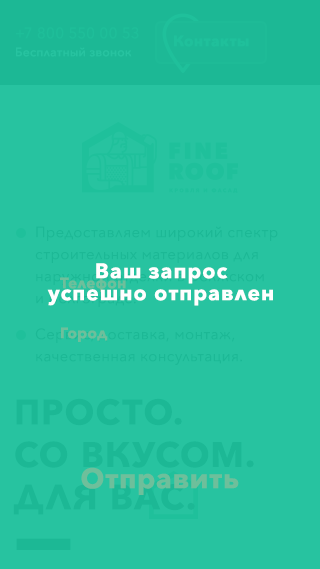
<style>
.page{position:relative;width:320px;height:569px;background:#27c3a0}
.page>*{position:absolute;margin:0}
.t1{font:15px "AvenirNext-Regular";letter-spacing:0.025em;color:#1ebe99}
.t2{font:15px "AvenirNext-Bold";letter-spacing:0.025em;color:#1fc09b}
.t3{font:12px "AvenirNext-Medium";letter-spacing:0.025em;color:#27c3a0}
.t4{font:21px/22px "AvenirNext-Bold";letter-spacing:0.05em;color:#ffffff}
.t5{font:15px/22px "AvenirNext-Regular";letter-spacing:0.025em;color:#1cb895}
.t6{font:15px "AvenirNext-Bold";letter-spacing:0.025em;color:#6ebf9b}
.t7{font:35px/42.5px "AvenirNext-Bold";letter-spacing:0.05em;color:#1cb895;text-transform:uppercase}
.t8{font:28px "AvenirNext-Bold";letter-spacing:0.025em;color:#6ebf9b}
</style>
<div class="page">
<p class="t1" style="left:16px;top:27px;width:123px;height:12px">+7 800 550 00 53</p>
<p class="t2" style="left:174px;top:35px;width:75px;height:12px">Контакты</p>
<p class="t3" style="left:16px;top:47px;width:116px;height:10px">Бесплатный звонок</p>
<p class="t4" style="left:47px;top:263px;width:226px;height:43px;text-align:center">Ваш запрос<br>успешно отправлен</p>
<p class="t5" style="left:35px;top:328px;width:207px;height:37px">Сервис, доставка, монтаж,<br>качественная консультация.</p>
<p class="t6" style="left:61px;top:327px;width:47px;height:15px">Город</p>
<p class="t7" style="left:13px;top:398px;width:241px;height:117px">Просто.<br>Со вкусом.<br>Для вас.</p>
<p class="t8" style="left:81px;top:467px;width:158px;height:28px">Отправить</p>
</div>
